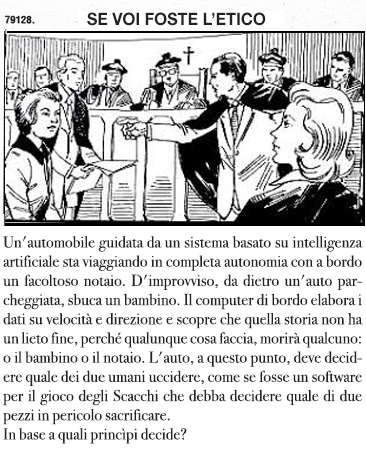
<style>
.page{position:relative;width:366px;height:470px;background:#ffffff}
.page>*{position:absolute;margin:0}
.t1{font:17.3px "HelveticaNeue-Bold";color:#222222;scale:0.94 1}
.t2{font:16px "BodoniSvtyTwoOSITCTT-Book";color:#222222}
</style>
<div class="page">
<p class="t1" style="left:87px;top:12px;width:179px;height:14px">SE VOI FOSTE L’ETICO</p>
<p class="t2" style="left:3px;top:236px;width:360px;height:208px;text-align:justify">Un'automobile guidata da un sistema basato su intelligenza artificiale sta viaggiando in completa autonomia con a bordo un facoltoso notaio. D'improvviso, da dietro un'auto parcheggiata, sbuca un bambino. Il computer di bordo elabora i dati su velocità e direzione e scopre che quella storia non ha un lieto fine, perché qualunque cosa faccia, morirà qualcuno: o il bambino o il notaio. L'auto, a questo punto, deve decidere quale dei due umani uccidere, come se fosse un software per il gioco degli Scacchi che debba decidere quale di due pezzi in pericolo sacrificare.<br>In base a quali princìpi decide?</p>
</div>
